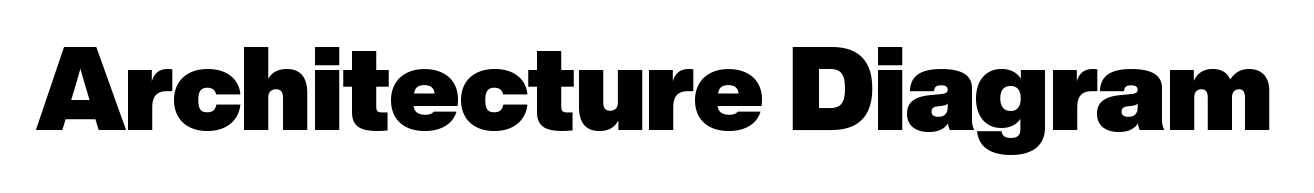
<style>
.page{position:relative;width:1314px;height:193px;background:#ffffff}
.page>*{position:absolute;margin:0}
.t1{font:116.7px "HelveticaNowDisplay-XBlk";letter-spacing:-0.01em;color:#000000}
</style>
<div class="page">
<p class="t1" style="left:35px;top:47px;width:1235px;height:108px">Architecture Diagram</p>
</div>
